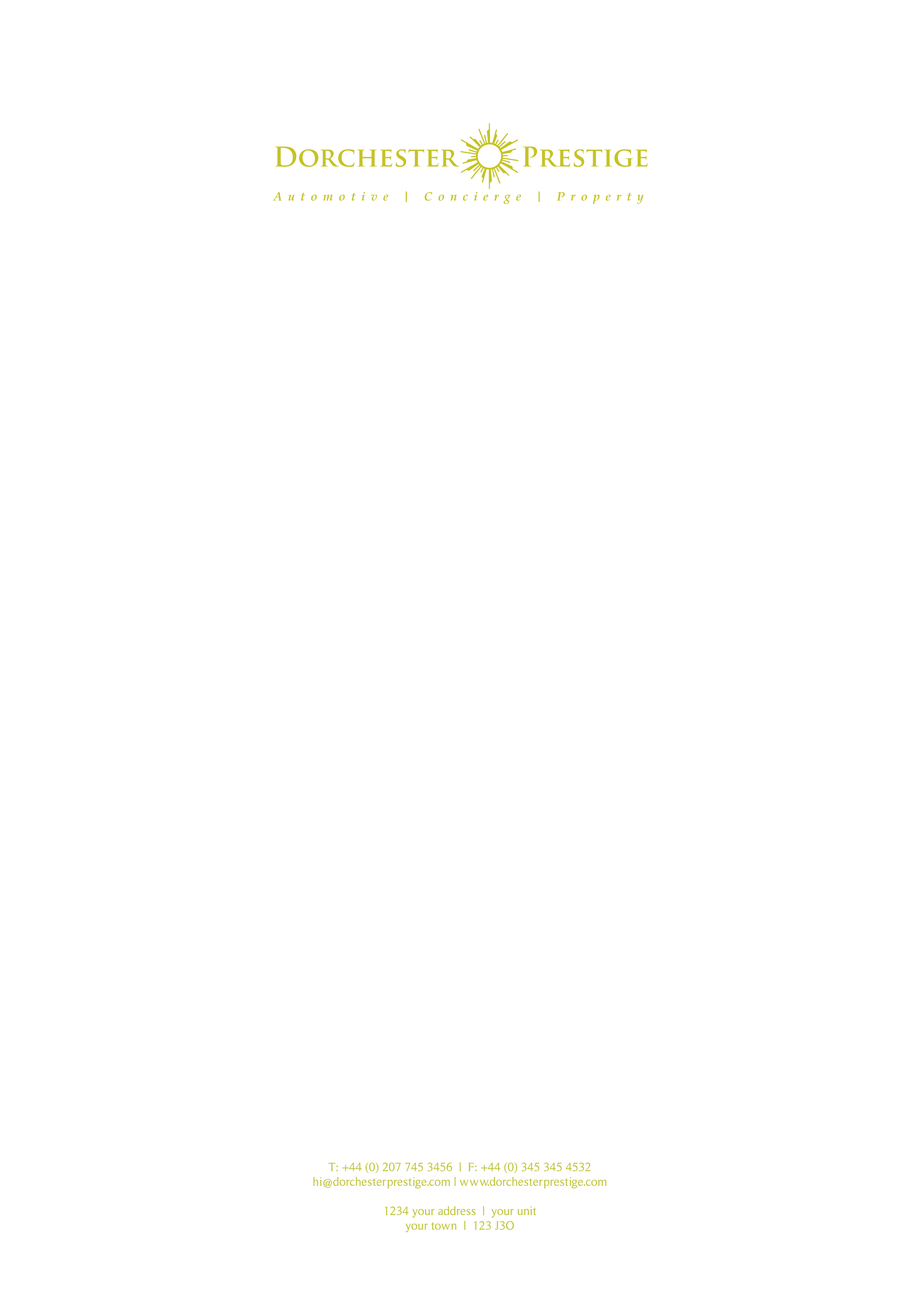
<style>
.page{position:relative;width:920px;height:1296px;background:#ffffff}
.page>*{position:absolute;margin:0}
.t1{font:12.2px "RomanSerif";color:#bec234}
</style>
<div class="page">
<p class="t1" style="left:313px;top:1162px;width:294px;height:70px;text-align:center">T: +44 (0) 207 745 3456  |  F: +44 (0) 345 345 4532<br>hi@dorchesterprestige.com | www.dorchesterprestige.com<br><br>1234 your address  |  your unit<br>your town  |  123 J3O</p>
</div>
